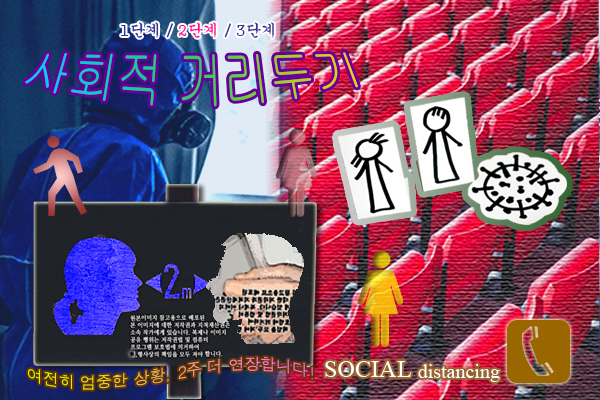
<style>
.page{position:relative;width:600px;height:400px}
.page>*{position:absolute;margin:0}
.t1{font:16px "Gungsuh";color:#333399}
.t2{font:16px "Gungsuh";color:#ff0099}
.t3{font:39.5px "Gulim";scale:1.15 1}
.t4{font:16.1px/4px "Dotum"}
</style>
<div class="page">
<p class="t1" style="left:121px;top:22px;width:153px;height:16px">1단계 / <span class="t2">2단계</span> / 3단계</p>
<p class="t3" style="left:25px;top:52px;width:333px;height:55px">사회적 거리두기</p>
<p class="t4" style="left:27px;top:356px;width:286px;height:34px">여전히 엄중한 상황, 2주 더 연장합니다!</p>
</div>
